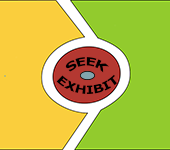
<style>
.page{position:relative;width:170px;height:150px;background:#92cb2d}
.page>*{position:absolute;margin:0}
.t1{font:11.5px "Tahoma-Bold";color:#000000}
</style>
<div class="page">
<p class="t1" style="left:65px;top:57px;width:44px;height:16px">SEEK</p>
<p class="t1" style="left:56px;top:74px;width:61px;height:20px;text-align:center">EXHIBIT</p>
</div>
